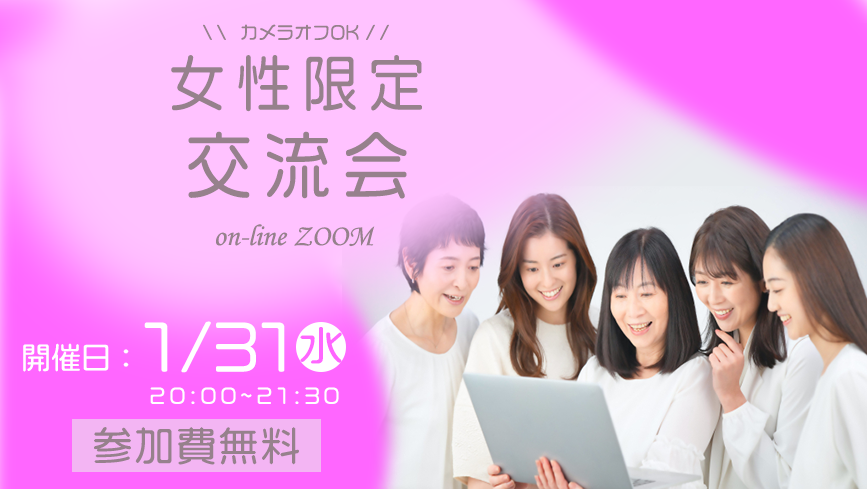
<style>
.page{position:relative;width:867px;height:489px}
.page>*{position:absolute;margin:0}
.t1{font:18px "VDL-LogoMaruJr-Regular";color:#96818c}
.t2{font:18px "VDL-LogoMaruJr-Regular";letter-spacing:0.2em;color:#96818c}
.t3{font:60.5px "VDL-LogoMaruJr-Regular";letter-spacing:0.2em;color:#96818c;scale:0.92 1}
.t4{font:72px "VDL-LogoMaruJr-Regular";letter-spacing:0.2em;color:#96818c;scale:0.92 1}
.t5{font:30px "MonotypeCorsiva";color:#96818c}
.t6{font:30px "VDL-LogoMaruJr-Regular";color:#ffffff}
.t7{font:60px "VDL-LogoMaruJr-Regular";color:#ffffff}
.t8{font:40px "VDL-LogoMaruJr-Regular";color:#ff66ff;scale:1.11 1}
.t9{font:20px "VDL-LogoMaruJr-Regular";letter-spacing:0.2em;color:#ffffff}
.t10{font:40px "VDL-LogoMaruJr-Regular";letter-spacing:0.05em;color:#96818c}
</style>
<div class="page">
<p class="t1" style="left:203px;top:24px;width:186px;height:16px"><span class="t2">\\ </span>カメラオフOK <span class="t2">//</span></p>
<p class="t3" style="left:171px;top:55px;width:251px;height:144px;text-align:center">女性限定<br><span class="t4">交流会</span></p>
<p class="t5" style="left:216px;top:224px;width:159px;height:23px">on-line ZOOM</p>
<p class="t6" style="left:23px;top:321px;width:262px;height:52px">開催日：<span class="t7">1/31</span></p>
<p class="t8" style="left:300px;top:327px;width:42px;height:37px">水</p>
<p class="t9" style="left:150px;top:387px;width:189px;height:17px">20:00~21:30</p>
<p class="t10" style="left:94px;top:427px;width:205px;height:38px">参加費無料</p>
</div>
